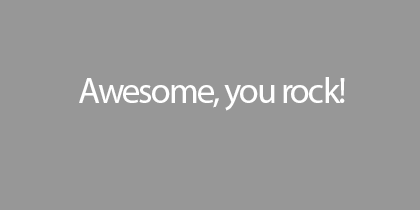
<style>
.page{position:relative;width:420px;height:210px;background:#979797}
.page>*{position:absolute;margin:0}
.t1{font:36px "MyriadPro-Regular";letter-spacing:-0.05em;color:#ffffff}
</style>
<div class="page">
<p class="t1" style="left:79px;top:77px;width:266px;height:34px">Awesome, you rock!</p>
</div>
